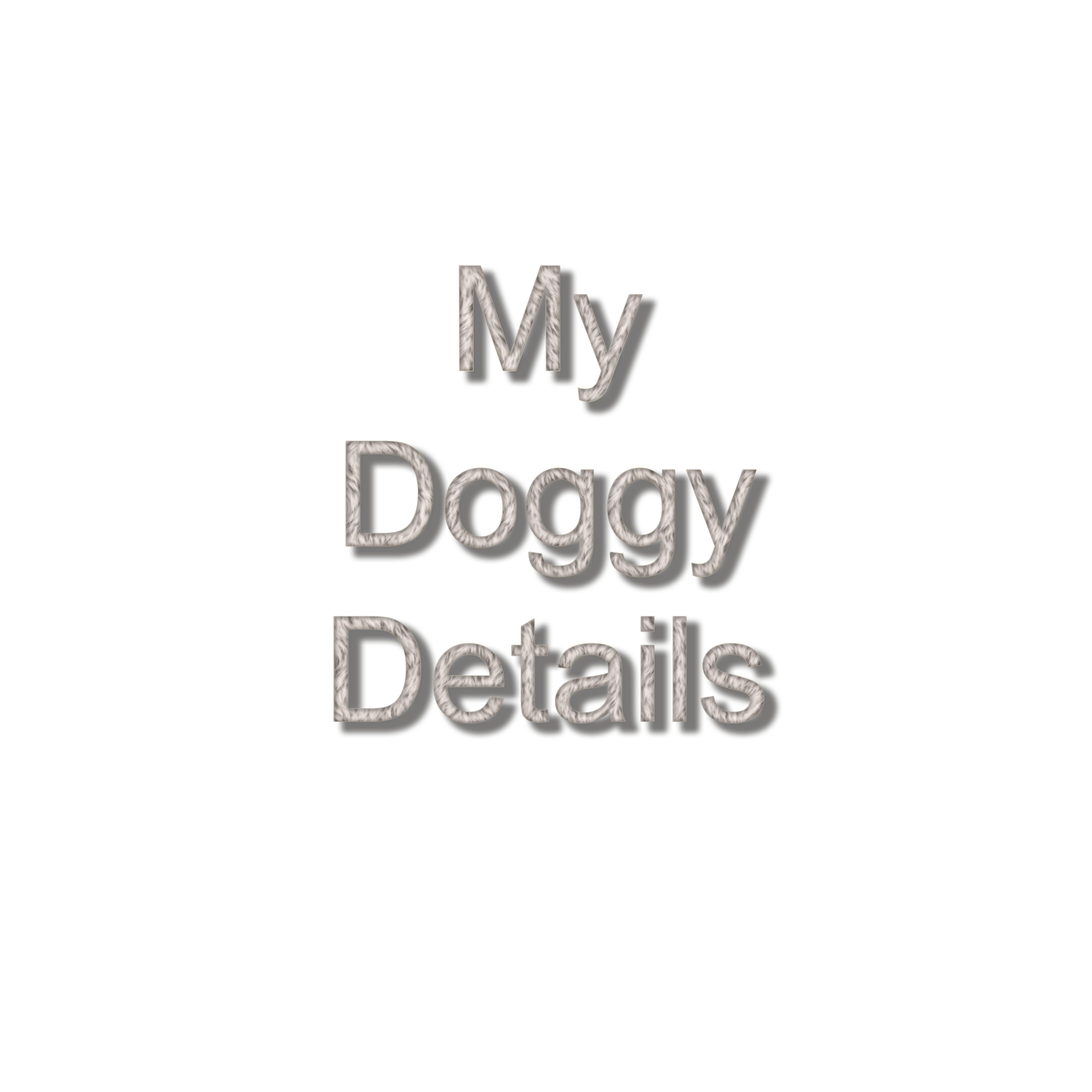
<style>
.page{position:relative;width:1092px;height:1092px;background:#ffffff}
.page>*{position:absolute;margin:0}
.t1{font:146.1px "ArialMT"}
</style>
<div class="page">
<p class="t1" style="left:334px;top:266px;width:430px;height:457px;text-align:center">My<br>Doggy<br>Details</p>
</div>
